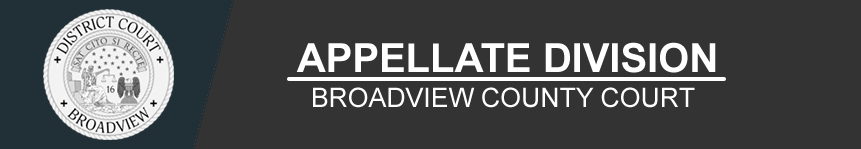
<style>
.page{position:relative;width:861px;height:149px;background:#333333}
.page>*{position:absolute;margin:0}
.t1{font:40px "Arial-BoldMT";color:#ffffff}
.t2{font:26.7px "ArialMT";color:#ffffff}
</style>
<div class="page">
<p class="t1" style="left:296px;top:42px;width:420px;height:31px">APPELLATE DIVISION</p>
<p class="t2" style="left:313px;top:87px;width:382px;height:21px">BROADVIEW COUNTY COURT</p>
</div>
